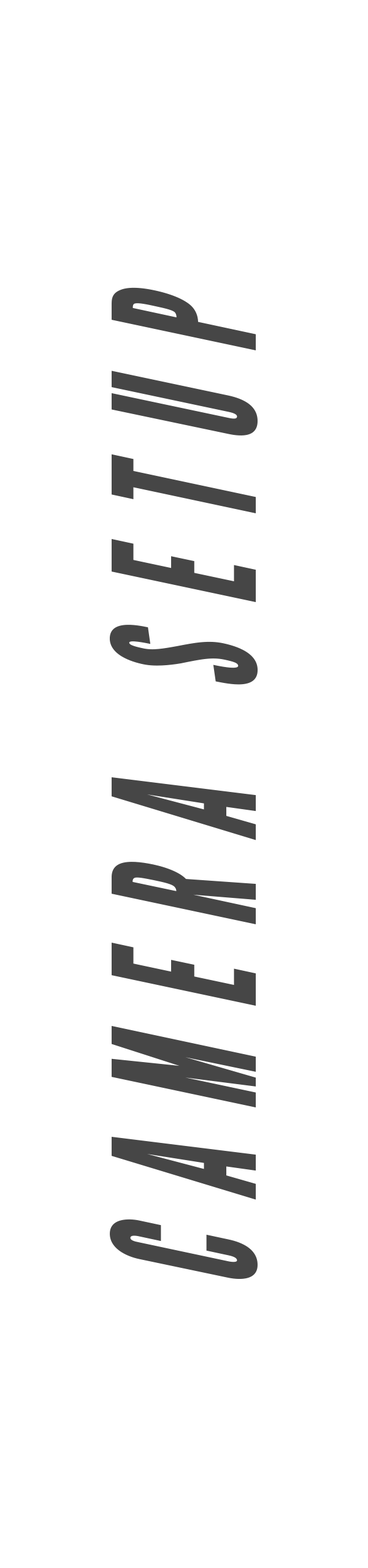
<style>
.page{position:relative;width:368px;height:1568px;background:#ffffff}
.page>*{position:absolute;margin:0}
.t1{font:196px "LeagueGothic-CondensedItalic";letter-spacing:0.2em;color:#464646}
</style>
<div class="page">
<p class="t1" style="left:110px;top:287px;width:148px;height:992px;rotate:-90deg">CAMERA SETUP</p>
</div>
